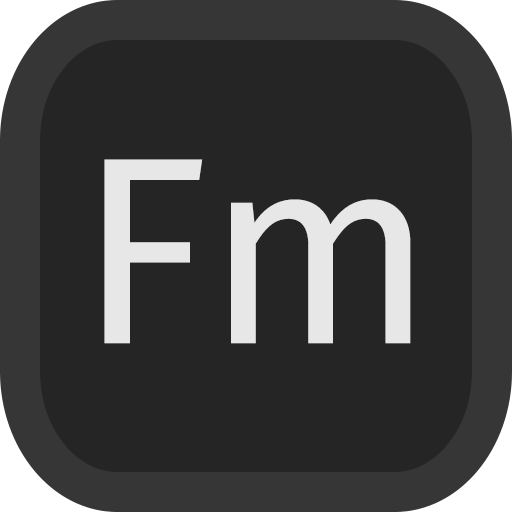
<style>
.page{position:relative;width:512px;height:512px;background:#252525}
.page>*{position:absolute;margin:0}
.t1{font:266.2px "FiraSans-Regular";letter-spacing:0.01em;color:#e7e7e7}
</style>
<div class="page">
<p class="t1" style="left:104px;top:159px;width:307px;height:185px">Fm</p>
</div>
